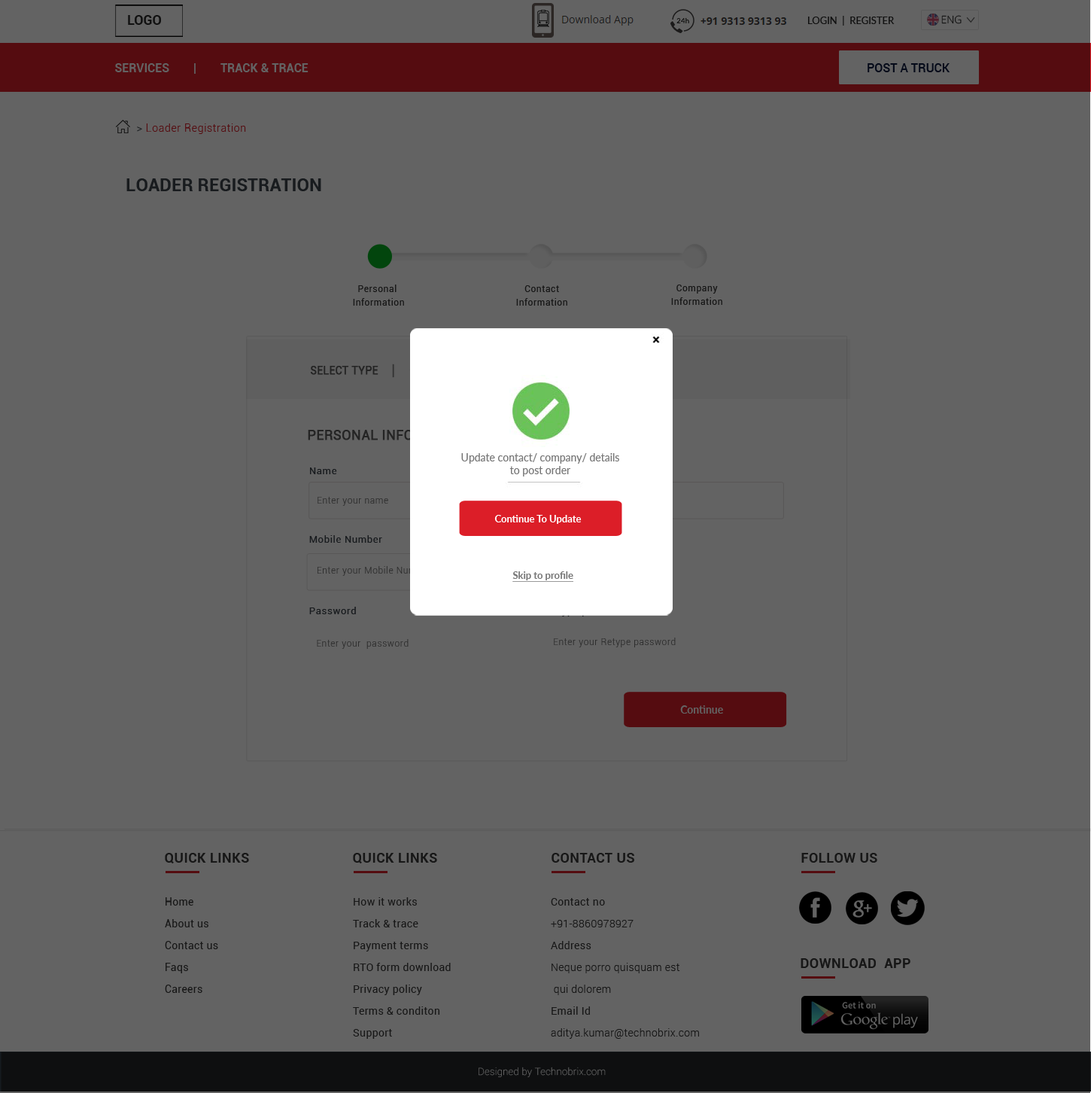
<style>
.page{position:relative;width:1091px;height:1093px;background:#636363}
.page>*{position:absolute;margin:0}
.t1{font:13.5px "Roboto-Bold";color:#111111}
.t2{font:9.8px "Lato-Regular";color:#111111;text-transform:uppercase}
.t3{font:10.5px "OpenSans-Light";color:#2c2c2c}
.t4{font:12px "Roboto-Bold";color:#636363;text-transform:uppercase}
.t5{font:12px "Roboto-Medium";color:#050a19}
.t6{font:10.5px "Roboto-Light";letter-spacing:0.05em;color:#550c10}
.t7{font:18.1px "Roboto-Bold";color:#181b1e;text-transform:uppercase}
.t8{font:9px/13.5px "Roboto-Regular";letter-spacing:0.05em;color:#171717}
.t9{font:10.5px "Roboto-Regular";color:#242424;font-weight:bold}
.t10{font:10.5px "Lato-Regular";color:#777777}
.t11{font:9.8px "Roboto-Regular";letter-spacing:0.05em;color:#181b1e}
.t12{font:9px "Roboto-Light";letter-spacing:0.05em;color:#2e2e2e}
.t13{font:9.8px "Lato-Bold";color:#ffffff}
.t14{font:9.8px "Lato-Bold";color:#777777;text-decoration:underline}
.t15{font:10.5px "Lato-Bold";color:#636363}
.t16{font:13.5px "Roboto-Bold";letter-spacing:0.025em;color:#171717}
.t17{font:10.5px/21.8px "Roboto-Regular";letter-spacing:0.025em;color:#171717}
.t18{font:10.5px/21.8px "Roboto-Light";letter-spacing:0.025em;color:#171717}
.t19{font:9.8px "Roboto-Thin";letter-spacing:0.025em;color:#636363}
</style>
<div class="page">
<p class="t1" style="left:128px;top:15px;width:33px;height:10px">LOGO</p>
<p class="t2" style="left:808px;top:16px;width:87px;height:10px">Login  |  Register</p>
<p class="t3" style="left:941px;top:15px;width:21px;height:9px">ENG</p>
<p class="t4" style="left:115px;top:63px;width:194px;height:11px">Services        |        Track &amp; TraCe</p>
<p class="t5" style="left:868px;top:63px;width:83px;height:9px">POST A TRUCK</p>
<p class="t6" style="left:137px;top:123px;width:109px;height:11px">&gt; Loader Registration</p>
<p class="t7" style="left:126px;top:178px;width:195px;height:13px">Loader Registration</p>
<p class="t8" style="left:353px;top:284px;width:51px;height:22px;text-align:center">Personal <br>Information</p>
<p class="t8" style="left:516px;top:285px;width:51px;height:21px;text-align:center">Contact<br>Information</p>
<p class="t8" style="left:671px;top:284px;width:51px;height:21px;text-align:center">Company<br>Information</p>
<p class="t9" style="left:310px;top:366px;width:69px;height:9px">SELECT TYPE</p>
<p class="t10" style="left:461px;top:453px;width:158px;height:23px;text-align:center">Update contact/ company/ details<br>to post order</p>
<p class="t11" style="left:310px;top:467px;width:27px;height:7px">Name</p>
<p class="t12" style="left:318px;top:497px;width:70px;height:9px">Enter your name</p>
<p class="t13" style="left:494px;top:515px;width:88px;height:9px">Continue To Update</p>
<p class="t11" style="left:309px;top:535px;width:73px;height:8px">Mobile Number</p>
<p class="t14" style="left:513px;top:571px;width:60px;height:11px">Skip to profile</p>
<p class="t11" style="left:309px;top:607px;width:47px;height:7px">Password</p>
<p class="t12" style="left:317px;top:639px;width:92px;height:10px">Enter your  password</p>
<p class="t12" style="left:554px;top:637px;width:122px;height:10px">Enter your Retype password</p>
<p class="t15" style="left:680px;top:705px;width:43px;height:8px">Continue</p>
<p class="t16" style="left:165px;top:853px;width:84px;height:10px">QUICK LINKS</p>
<p class="t16" style="left:353px;top:853px;width:84px;height:10px">QUICK LINKS</p>
<p class="t16" style="left:552px;top:853px;width:82px;height:9px">CONTACT US</p>
<p class="t16" style="left:801px;top:853px;width:77px;height:9px">FOLLOW US</p>
<p class="t17" style="left:165px;top:897px;width:53px;height:96px">Home<br>About us <br>Contact us<br>Faqs<br>Careers</p>
<p class="t17" style="left:353px;top:897px;width:98px;height:142px">How it works<br>Track &amp; trace<br>Payment terms<br>RTO form download<br>Privacy policy <br>Terms &amp; conditon<br>Support</p>
<p class="t18" style="left:551px;top:898px;width:148px;height:141px"><span class="t17">Contact no<br></span>+91-8860978927<br><span class="t17">Address<br></span>Neque porro quisquam est<br> qui dolorem<br><span class="t17">Email Id<br></span>aditya.kumar@technobrix.com</p>
<p class="t16" style="left:801px;top:958px;width:110px;height:10px">DOWNLOAD  APP</p>
<p class="t19" style="left:479px;top:1066px;width:127px;height:11px">Designed by Technobrix.com</p>
</div>
